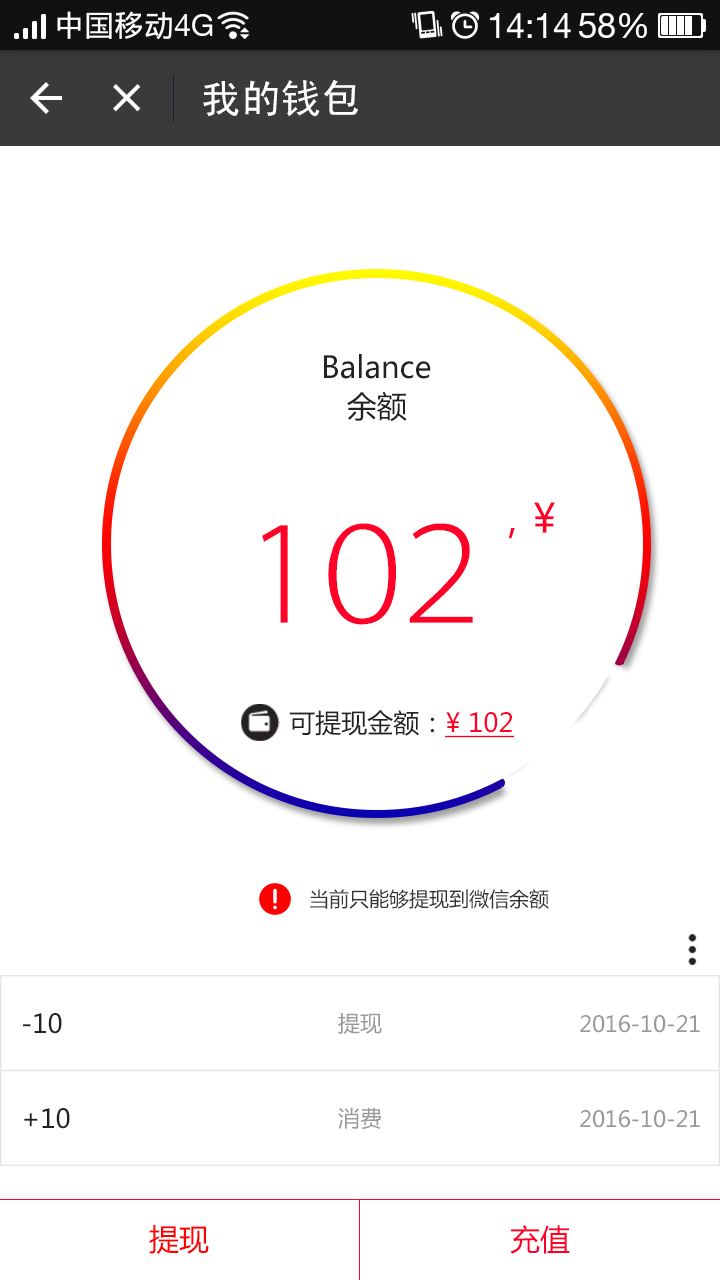
<style>
.page{position:relative;width:720px;height:1280px;background:#ffffff}
.page>*{position:absolute;margin:0}
.t1{font:40px "SimHei";color:#ffffff}
.t2{font:30px "MicrosoftYaHei";color:#242120}
.t3{font:40px "MicrosoftYaHei";color:#ff0029}
.t4{font:150px "ZHSRXT--GBK1-0";color:#ff0029}
.t5{font:26px "MicrosoftYaHei";color:#242120}
.t6{font:26px "MicrosoftYaHei";color:#ff0029;text-decoration:underline}
.t7{font:20px "MicrosoftYaHei";color:#333333}
.t8{font:22px "MicrosoftYaHei";color:#999999}
.t9{font:30px "MicrosoftYaHei";color:#ff0000}
.t10{font:30px "MicrosoftYaHei";color:#ff0029}
</style>
<div class="page">
<p class="t1" style="left:203px;top:80px;width:155px;height:37px">我的钱包</p>
<p class="t2" style="left:324px;top:354px;width:107px;height:25px">Balance</p>
<p class="t2" style="left:347px;top:391px;width:60px;height:31px">余额</p>
<p class="t3" style="left:508px;top:502px;width:47px;height:37px">，¥</p>
<p class="t4" style="left:262px;top:523px;width:211px;height:102px">102</p>
<p class="t5" style="left:289px;top:710px;width:225px;height:28px">可提现金额：<span class="t6">¥ 102</span></p>
<p class="t7" style="left:310px;top:889px;width:239px;height:20px">当前只能够提现到微信余额</p>
<p class="t5" style="left:23px;top:1013px;width:39px;height:21px">-10</p>
<p class="t8" style="left:338px;top:1013px;width:44px;height:21px">提现</p>
<p class="t8" style="left:580px;top:1015px;width:120px;height:18px">2016-10-21</p>
<p class="t5" style="left:24px;top:1108px;width:46px;height:21px">+10</p>
<p class="t8" style="left:338px;top:1107px;width:43px;height:22px">消费</p>
<p class="t8" style="left:580px;top:1110px;width:120px;height:18px">2016-10-21</p>
<p class="t9" style="left:149px;top:1225px;width:60px;height:29px">提现</p>
<p class="t10" style="left:510px;top:1225px;width:60px;height:29px">充值</p>
</div>
